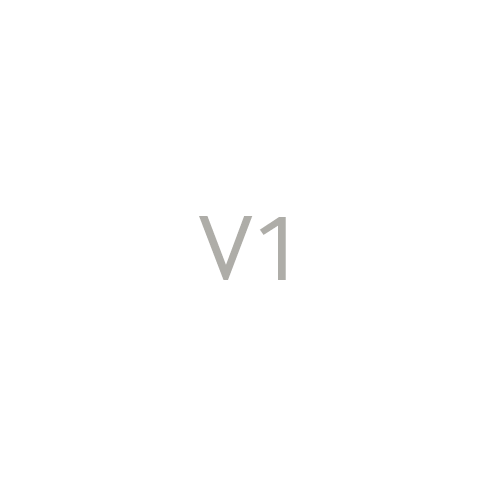
<style>
.page{position:relative;width:500px;height:500px;background:#ffffff}
.page>*{position:absolute;margin:0}
.t1{font:96px "SamsungInterFace-Regular";color:#aeada8}
</style>
<div class="page">
<p class="t1" style="left:199px;top:216px;width:87px;height:64px">V1</p>
</div>
